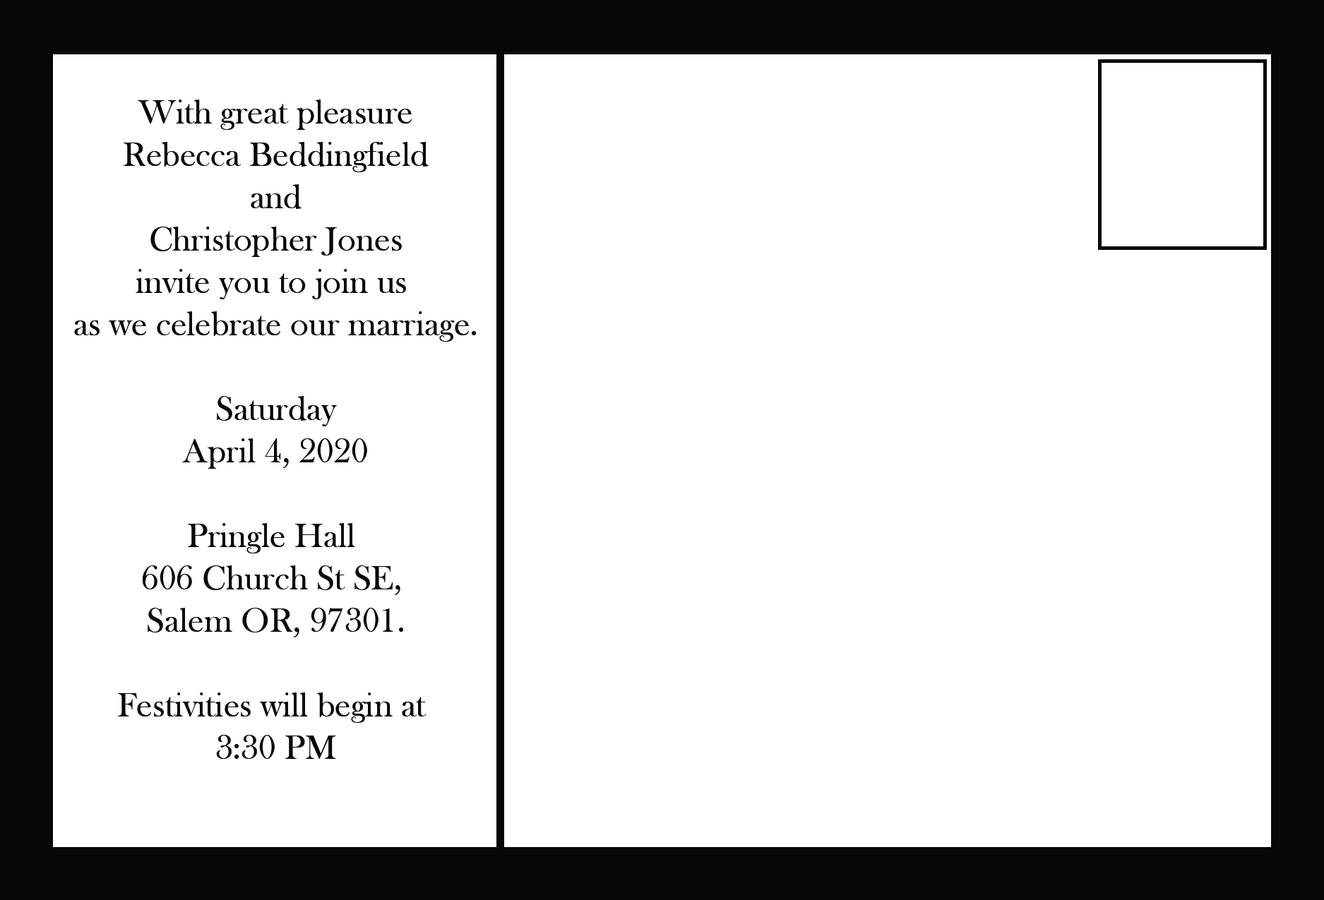
<style>
.page{position:relative;width:1324px;height:900px;background:#ffffff}
.page>*{position:absolute;margin:0}
.t1{font:35.3px "BaskOldFace";color:#060808}
</style>
<div class="page">
<p class="t1" style="left:74px;top:100px;width:402px;height:659px;text-align:center">With great pleasure<br>Rebecca Beddingfield<br>and<br>Christopher Jones<br>invite you to join us <br>as we celebrate our marriage.<br><br>Saturday<br>April 4, 2020<br><br>Pringle Hall <br>606 Church St SE, <br>Salem OR, 97301.<br><br>Festivities will begin at <br>3:30 PM</p>
</div>
